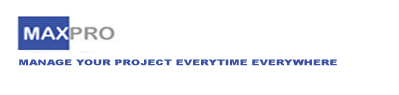
<style>
.page{position:relative;width:399px;height:95px;background:#ffffff}
.page>*{position:absolute;margin:0}
.t1{font:8px "Arial-Black";color:#3a51a5;scale:1.38 1}
</style>
<div class="page">
<p class="t1" style="left:19px;top:59px;width:318px;height:7px">MANAGE YOUR PROJECT EVERYTIME EVERYWHERE</p>
</div>
